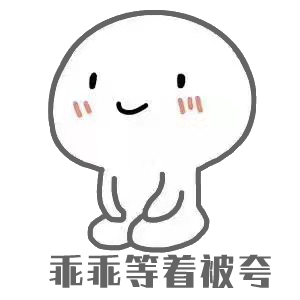
<style>
.page{position:relative;width:300px;height:300px;background:#ffffff}
.page>*{position:absolute;margin:0}
.t1{font:36px "AliHYAiHei";letter-spacing:0.05em;color:#656464}
</style>
<div class="page">
<p class="t1" style="left:49px;top:254px;width:222px;height:34px">乖乖等着被夸</p>
</div>
